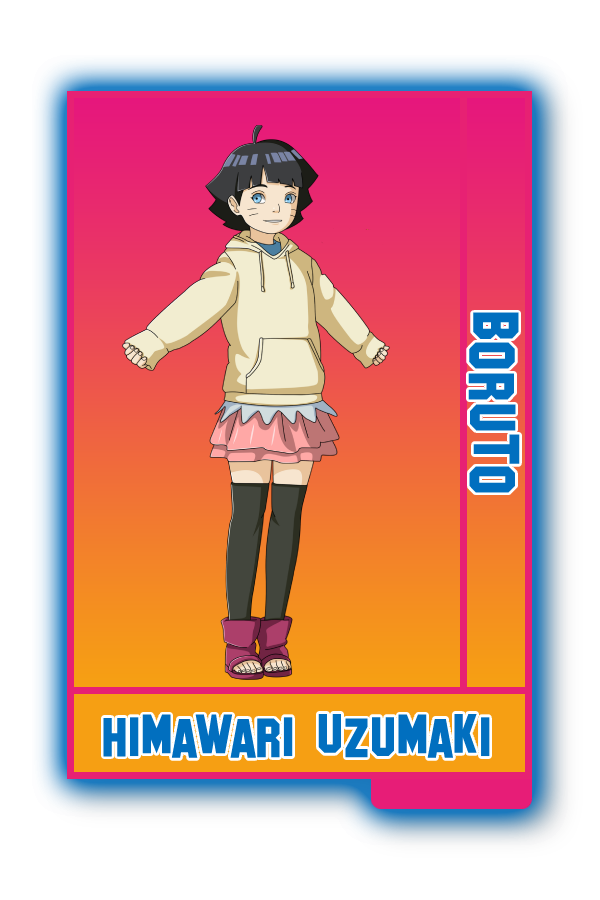
<style>
.page{position:relative;width:600px;height:900px;background:#ffffff}
.page>*{position:absolute;margin:0}
.t1{font:64.7px "SFHollywoodHills";color:#016fbf}
.t2{font:55.4px "SFHollywoodHills";color:#016fbf}
</style>
<div class="page">
<p class="t1" style="left:468px;top:312px;width:52px;height:181px;rotate:90deg">Boruto</p>
<p class="t2" style="left:103px;top:714px;width:387px;height:44px">Himawari Uzumaki</p>
</div>
